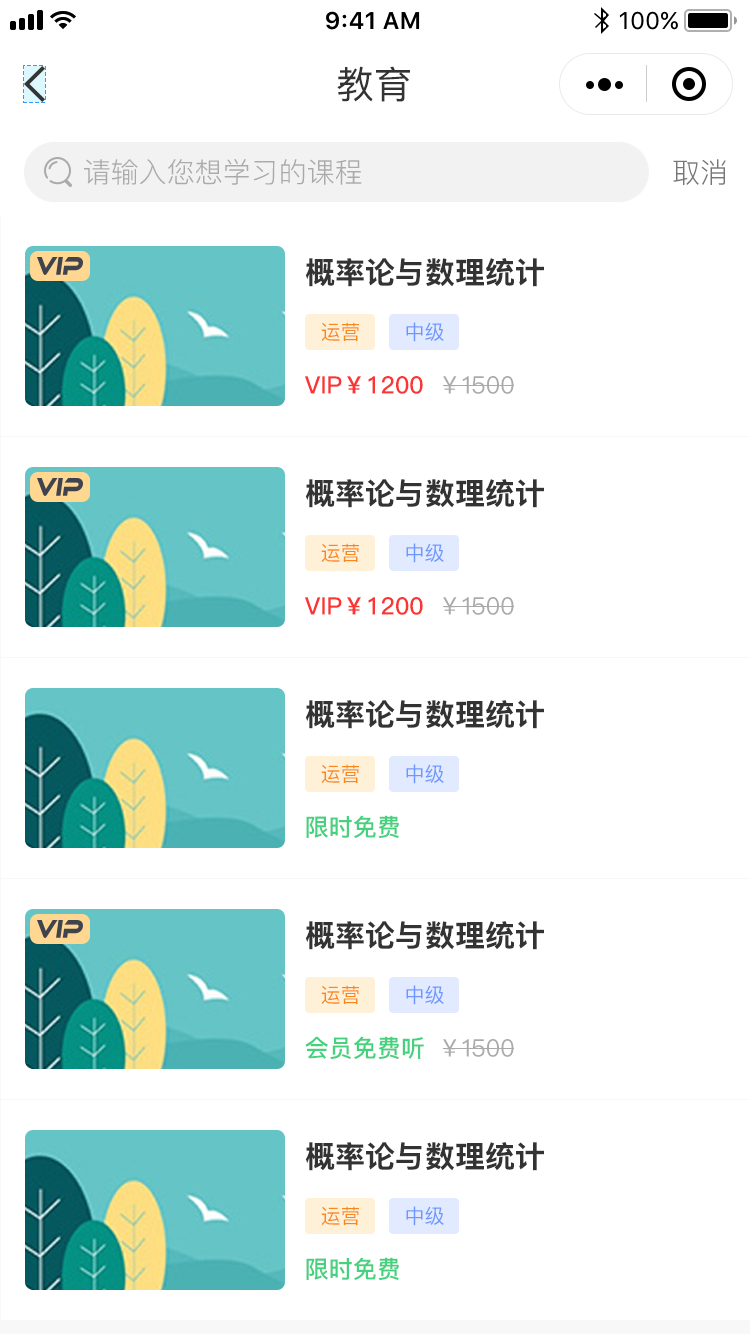
<style>
.page{position:relative;width:750px;height:1334px;background:#ffffff}
.page>*{position:absolute;margin:0}
.t1{font:24px "SFProText-Semibold";color:#000000}
.t2{font:24px "SFProText-Regular";color:#000000}
.t3{font:38px "PingFangSC-Regular";color:#333333}
.t4{font:28px "PingFang-SC-Regular";color:#aaaaaa}
.t5{font:28px "PingFang-SC-Regular";color:#777777}
.t6{font:30px "PingFangSC-Bold";color:#333333}
.t7{font:20px "PingFangSC-Regular";color:#fa871b}
.t8{font:20px "PingFangSC-Regular";color:#6d97ff}
.t9{font:24px "PingFang-SC-Bold";color:#fa3534}
.t10{font:24px "PingFangSC-Regular";color:#aaaaaa}
.t11{font:24px "PingFang-SC-Bold";color:#46d17e}
</style>
<div class="page">
<p class="t1" style="left:326px;top:11px;width:94px;height:19px">9:41 AM</p>
<p class="t2" style="left:619px;top:11px;width:59px;height:19px">100%</p>
<p class="t3" style="left:337px;top:66px;width:73px;height:36px">教育</p>
<p class="t4" style="left:84px;top:159px;width:278px;height:26px">请输入您想学习的课程</p>
<p class="t5" style="left:673px;top:159px;width:53px;height:26px">取消</p>
<p class="t6" style="left:305px;top:258px;width:239px;height:29px">概率论与数理统计</p>
<p class="t7" style="left:321px;top:322px;width:38px;height:19px">运营</p>
<p class="t8" style="left:406px;top:322px;width:38px;height:20px">中级</p>
<p class="t9" style="left:305px;top:376px;width:118px;height:18px">VIP￥1200</p>
<p class="t10" style="left:443px;top:376px;width:71px;height:18px">￥1500</p>
<p class="t6" style="left:305px;top:479px;width:239px;height:29px">概率论与数理统计</p>
<p class="t7" style="left:321px;top:543px;width:38px;height:19px">运营</p>
<p class="t8" style="left:406px;top:543px;width:38px;height:20px">中级</p>
<p class="t9" style="left:305px;top:597px;width:118px;height:18px">VIP￥1200</p>
<p class="t10" style="left:443px;top:597px;width:71px;height:18px">￥1500</p>
<p class="t6" style="left:305px;top:700px;width:239px;height:29px">概率论与数理统计</p>
<p class="t7" style="left:321px;top:764px;width:38px;height:19px">运营</p>
<p class="t8" style="left:406px;top:764px;width:38px;height:20px">中级</p>
<p class="t11" style="left:306px;top:815px;width:93px;height:23px">限时免费</p>
<p class="t6" style="left:305px;top:921px;width:239px;height:29px">概率论与数理统计</p>
<p class="t7" style="left:321px;top:985px;width:38px;height:19px">运营</p>
<p class="t8" style="left:406px;top:985px;width:38px;height:20px">中级</p>
<p class="t11" style="left:305px;top:1036px;width:119px;height:23px">会员免费听</p>
<p class="t10" style="left:443px;top:1039px;width:71px;height:18px">￥1500</p>
<p class="t6" style="left:305px;top:1142px;width:239px;height:29px">概率论与数理统计</p>
<p class="t7" style="left:321px;top:1206px;width:38px;height:19px">运营</p>
<p class="t8" style="left:406px;top:1206px;width:38px;height:20px">中级</p>
<p class="t11" style="left:306px;top:1257px;width:93px;height:23px">限时免费</p>
</div>
